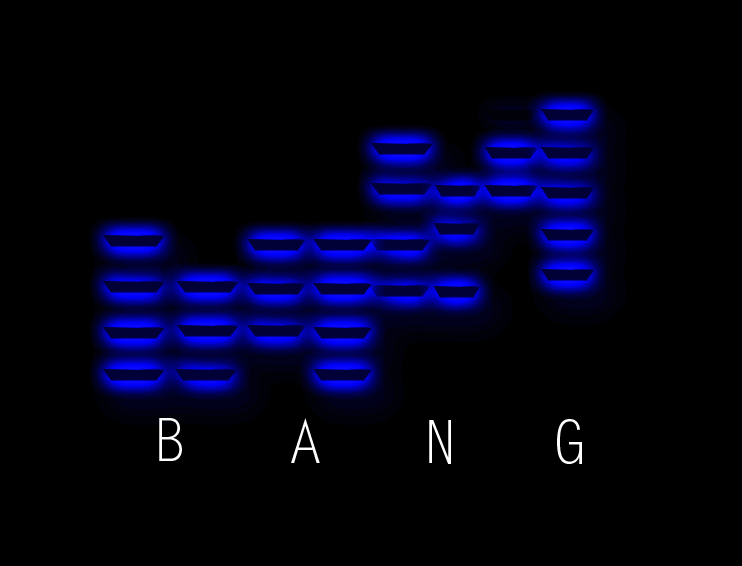
<style>
.page{position:relative;width:742px;height:566px;background:#000000}
.page>*{position:absolute;margin:0}
.t1{font:60px "LetterGothicStd";color:#ffffff}
</style>
<div class="page">
<p class="t1" style="left:159px;top:418px;width:23px;height:43px">B</p>
<p class="t1" style="left:291px;top:418px;width:29px;height:45px">A</p>
<p class="t1" style="left:429px;top:420px;width:22px;height:44px">N</p>
<p class="t1" style="left:557px;top:419px;width:25px;height:45px">G</p>
</div>
